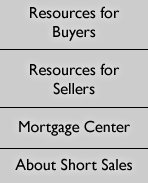
<style>
.page{position:relative;width:148px;height:183px;background:#cccccc}
.page>*{position:absolute;margin:0}
.t1{font:16px/19px "GillSansMT";color:#000000}
</style>
<div class="page">
<p class="t1" style="left:15px;top:6px;width:117px;height:165px;text-align:center">Resources for<br>Buyers<br><br>Resources for<br>Sellers<br><br>Mortgage Center<br><br>About Short Sales</p>
</div>
